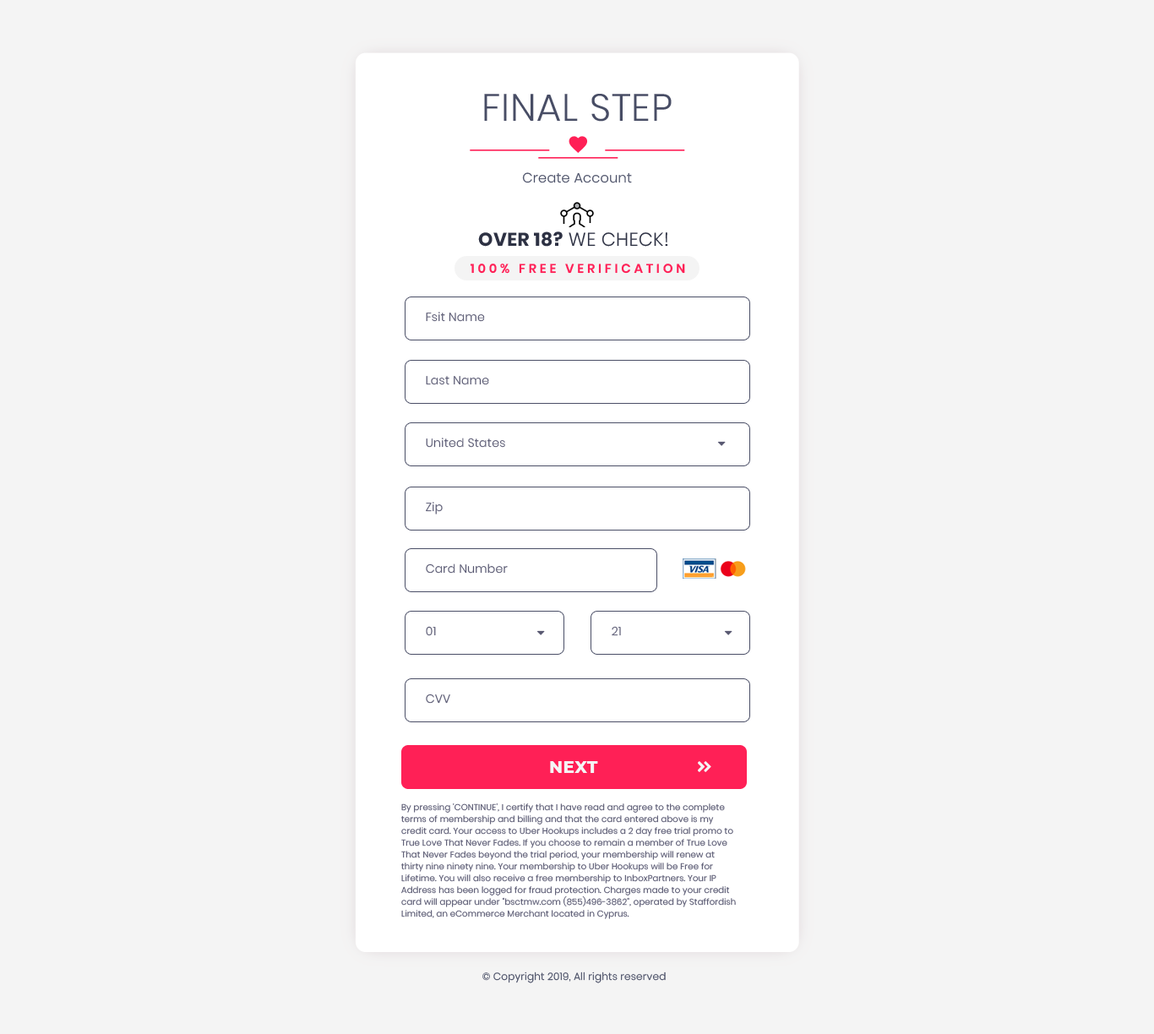
<style>
.page{position:relative;width:1154px;height:1034px;background:#f4f4f4}
.page>*{position:absolute;margin:0}
.t1{font:38px "Poppins-Light";letter-spacing:0.02em;color:#484d65;text-transform:uppercase}
.t2{font:13.5px "Poppins-Light";letter-spacing:0.02em;color:#4c5168}
.t3{font:18.6px "Poppins-Light";letter-spacing:0.02em;color:#2d3143}
.t4{font:18.6px "Poppins-Bold";letter-spacing:0.02em;color:#2d3143}
.t5{font:12.7px "Poppins-SemiBold";letter-spacing:0.25em;color:#ff2056}
.t6{font:11.8px "Poppins-Light";letter-spacing:0.02em;color:#595972}
.t7{font:16.9px "Montserrat-ExtraBold";letter-spacing:0.02em;color:#f5f5f5}
.t8{font:8.4px/11.8px "Poppins-Light";letter-spacing:0.02em;color:#595972}
.t9{font:10.1px "Poppins-Light";letter-spacing:0.02em;color:#4c5168}
</style>
<div class="page">
<p class="t1" style="left:484px;top:94px;width:187px;height:28px">Final Step</p>
<p class="t2" style="left:522px;top:172px;width:110px;height:11px">Create Account</p>
<p class="t3" style="left:478px;top:231px;width:190px;height:16px"><span class="t4">OVER 18? </span>WE CHECK!</p>
<p class="t5" style="left:470px;top:263px;width:215px;height:11px">100% FREE VERIFICATION</p>
<p class="t6" style="left:426px;top:312px;width:59px;height:10px">Fsit Name</p>
<p class="t6" style="left:426px;top:376px;width:63px;height:9px">Last Name</p>
<p class="t6" style="left:426px;top:437px;width:79px;height:11px">United States</p>
<p class="t6" style="left:426px;top:502px;width:17px;height:12px">Zip</p>
<p class="t6" style="left:426px;top:563px;width:82px;height:10px">Card Number</p>
<p class="t6" style="left:426px;top:626px;width:10px;height:10px">01</p>
<p class="t6" style="left:611px;top:626px;width:10px;height:10px">21</p>
<p class="t6" style="left:426px;top:693px;width:24px;height:10px">CVV</p>
<p class="t7" style="left:550px;top:761px;width:48px;height:12px">NEXT</p>
<p class="t8" style="left:401px;top:802px;width:335px;height:117px">By pressing 'CONTINUE', I certify that I have read and agree to the complete terms of membership and billing and that the card entered above is my credit card. Your access to Uber Hookups includes a 2 day free trial promo to True Love That Never Fades. If you choose to remain a member of True Love That Never Fades beyond the trial period, your membership will renew at thirty nine ninety nine. Your membership to Uber Hookups will be Free for Lifetime. You will also receive a free membership to InboxPartners. Your IP Address has been logged for fraud protection. Charges made to your credit card will appear under "bsctmw.com (855)496-3862", operated by Staffordish Limited, an eCommerce Merchant located in Cyprus.</p>
<p class="t9" style="left:482px;top:971px;width:183px;height:12px">© Copyright 2019, All rights reserved</p>
</div>
